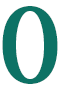
<style>
.page{position:relative;width:60px;height:85px;background:#ffffff}
.page>*{position:absolute;margin:0}
.t1{font:100px "ChiaroStd-B";color:#0d7265}
</style>
<div class="page">
<p class="t1" style="left:2px;top:6px;width:56px;height:78px">0</p>
</div>
